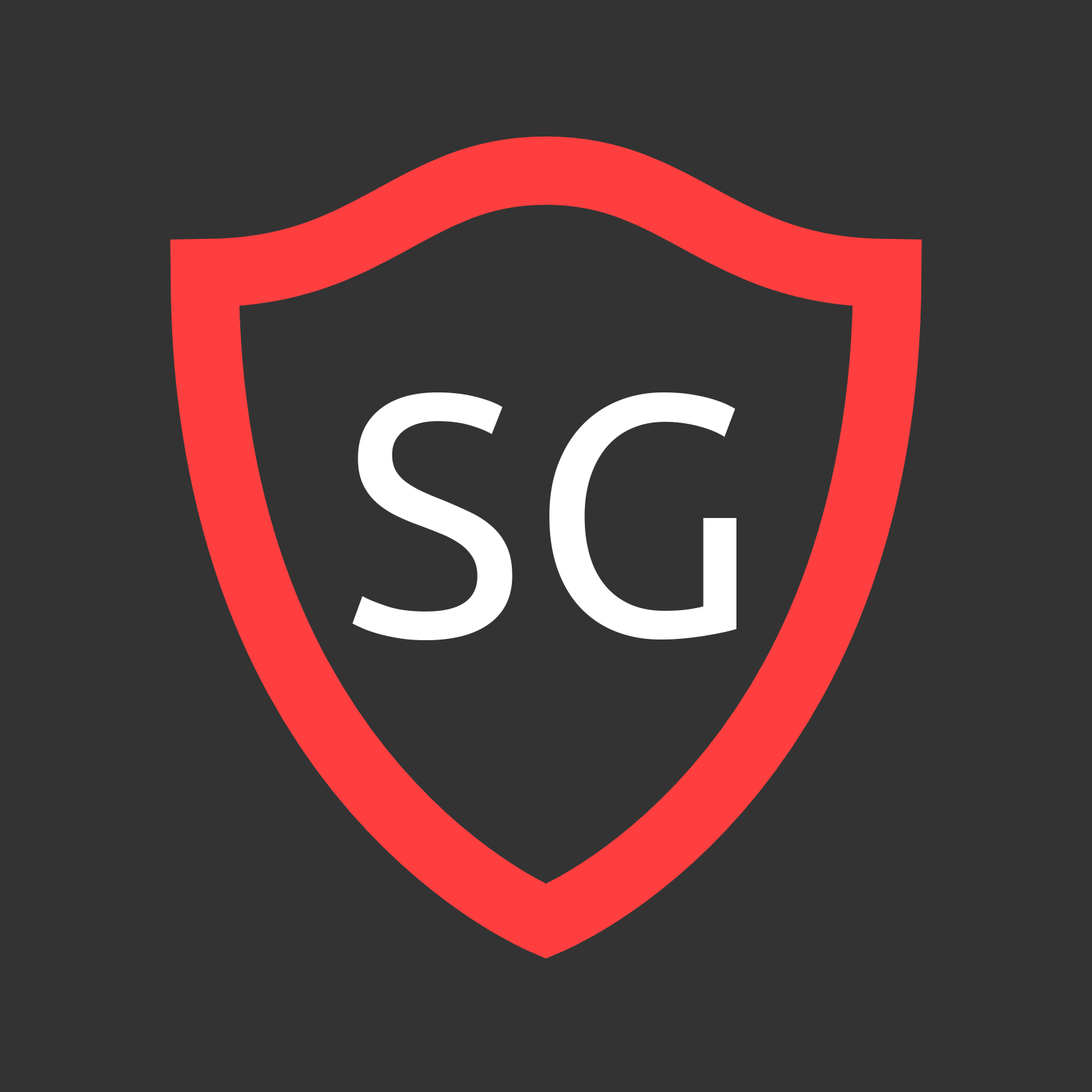
<style>
.page{position:relative;width:1092px;height:1092px;background:#333333}
.page>*{position:absolute;margin:0}
.t1{font:341.2px "Ubuntu";letter-spacing:0.02em;color:#ffffff}
</style>
<div class="page">
<p class="t1" style="left:352px;top:392px;width:384px;height:248px">SG</p>
</div>
